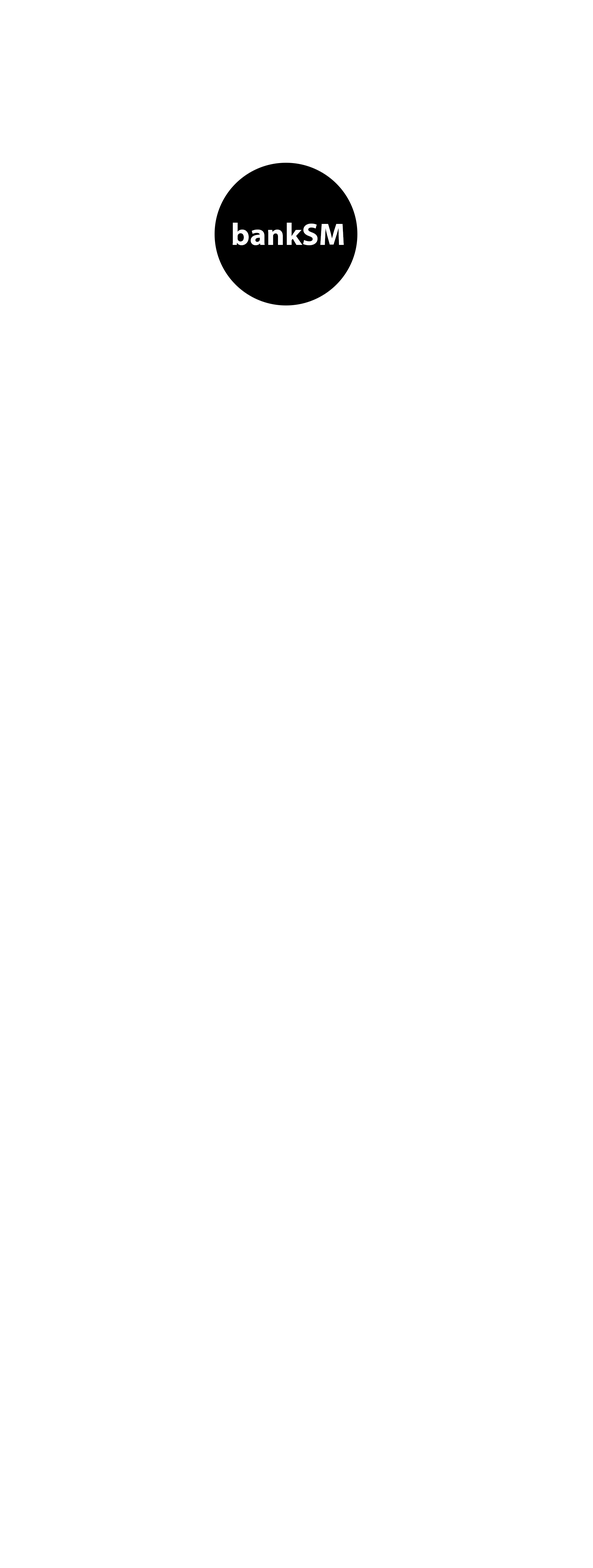
<style>
.page{position:relative;width:593px;height:1568px;background:#ffffff}
.page>*{position:absolute;margin:0}
.t1{font:31.4px "MyriadPro-Bold";color:#ffffff}
</style>
<div class="page">
<p class="t1" style="left:232px;top:223px;width:112px;height:22px">bankSM</p>
</div>
